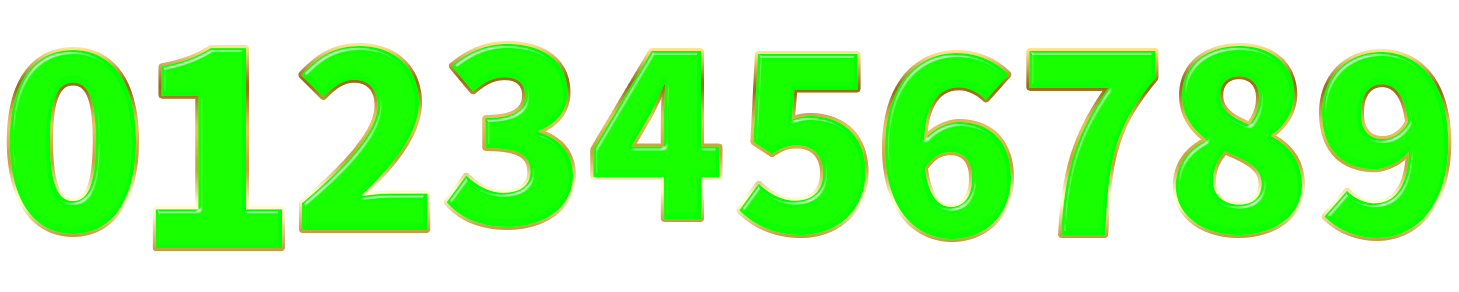
<style>
.page{position:relative;width:1459px;height:292px;background:#ffffff}
.page>*{position:absolute;margin:0}
.t1{font:108.3px "SourceHanSans-Heavy";color:#18ff00}
</style>
<div class="page">
<p class="t1" style="left:9px;top:50px;width:127px;height:184px">0</p>
<p class="t1" style="left:155px;top:48px;width:127px;height:201px;text-align:center">1</p>
<p class="t1" style="left:301px;top:46px;width:127px;height:184px">2</p>
<p class="t1" style="left:446px;top:43px;width:127px;height:184px">3</p>
<p class="t1" style="left:593px;top:51px;width:127px;height:168px">4</p>
<p class="t1" style="left:739px;top:54px;width:127px;height:182px">5</p>
<p class="t1" style="left:885px;top:53px;width:126px;height:187px;text-align:center">6</p>
<p class="t1" style="left:1029px;top:50px;width:127px;height:185px;text-align:center">7</p>
<p class="t1" style="left:1175px;top:45px;width:127px;height:190px;text-align:center">8</p>
<p class="t1" style="left:1322px;top:51px;width:127px;height:187px;text-align:center">9</p>
</div>
